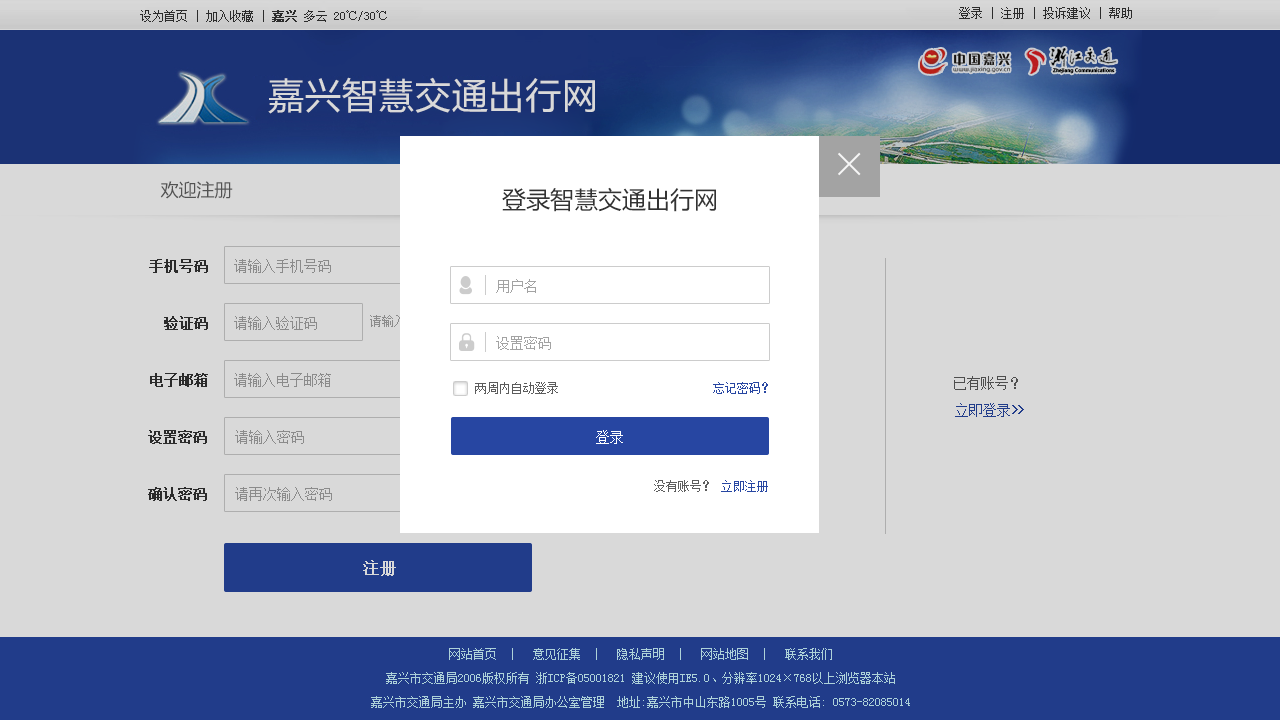
<style>
.page{position:relative;width:1280px;height:720px;background:#d9d9d9}
.page>*{position:absolute;margin:0}
.t1{font:12px "SimSun";color:#333333}
.t2{font:12px "SimSun";color:#333333;font-weight:bold}
.t3{font:36px "MicrosoftYaHei";letter-spacing:0.02em;color:#d9d9d9}
.t4{font:18px "MicrosoftYaHei";color:#626262}
.t5{font:24px "MicrosoftYaHei";color:#333333}
.t6{font:14px "SimSun";color:#333333;font-weight:bold}
.t7{font:14px "SimSun";color:#a3a3a3}
.t8{font:14px "SimSun";color:#5c5c5c}
.t9{font:12px "SimSun";color:#5c5c5c}
.t10{font:12px "SimSun";color:#2746a2}
.t11{font:14px "SimSun";color:#2746a2}
.t12{font:14px "SimSun";color:#2746a2;font-weight:bold}
.t13{font:14px "SimSun";color:#ffffff}
.t14{font:12px "NSimSun";color:#5c5c5c}
.t15{font:12px "NSimSun";color:#2746a2}
.t16{font:16px "SimSun";color:#d9d9d9;font-weight:bold}
.t17{font:12px/24px "NSimSun";color:#aed2d9}
</style>
<div class="page">
<p class="t1" style="left:140px;top:10px;width:247px;height:12px">设为首页 | 加入收藏 | <span class="t2">嘉兴</span> 多云 20℃/30℃</p>
<p class="t1" style="left:959px;top:7px;width:173px;height:12px">登录 | 注册 | 投诉建议 | 帮助</p>
<p class="t3" style="left:268px;top:77px;width:327px;height:37px">嘉兴智慧交通出行网</p>
<p class="t4" style="left:160px;top:181px;width:73px;height:18px">欢迎注册</p>
<p class="t5" style="left:502px;top:187px;width:214px;height:25px">登录智慧交通出行网</p>
<p class="t6" style="left:149px;top:259px;width:59px;height:14px">手机号码</p>
<p class="t7" style="left:234px;top:259px;width:97px;height:14px">请输入手机号码</p>
<p class="t7" style="left:496px;top:279px;width:40px;height:14px">用户名</p>
<p class="t6" style="left:164px;top:316px;width:44px;height:14px">验证码</p>
<p class="t7" style="left:234px;top:316px;width:83px;height:14px">请输入验证码</p>
<p class="t7" style="left:496px;top:336px;width:55px;height:14px">设置密码</p>
<p class="t6" style="left:150px;top:373px;width:58px;height:14px">电子邮箱</p>
<p class="t7" style="left:234px;top:373px;width:97px;height:14px">请输入电子邮箱</p>
<p class="t8" style="left:954px;top:376px;width:64px;height:14px">已有账号？</p>
<p class="t9" style="left:475px;top:382px;width:83px;height:12px">两周内自动登录</p>
<p class="t10" style="left:713px;top:382px;width:55px;height:12px">忘记密码？</p>
<p class="t11" style="left:955px;top:403px;width:69px;height:14px">立即登录<span class="t12">&gt;&gt;</span></p>
<p class="t6" style="left:148px;top:430px;width:59px;height:14px">设置密码</p>
<p class="t7" style="left:235px;top:430px;width:69px;height:14px">请输入密码</p>
<p class="t13" style="left:596px;top:430px;width:27px;height:14px">登录</p>
<p class="t14" style="left:654px;top:480px;width:55px;height:12px">没有账号？</p>
<p class="t15" style="left:721px;top:480px;width:47px;height:12px">立即注册</p>
<p class="t6" style="left:148px;top:487px;width:59px;height:14px">确认密码</p>
<p class="t7" style="left:235px;top:487px;width:97px;height:14px">请再次输入密码</p>
<p class="t16" style="left:363px;top:560px;width:33px;height:16px">注册</p>
<p class="t17" style="left:371px;top:648px;width:539px;height:60px;text-align:center">网站首页  |   意见征集  |   隐私声明  |   网站地图  |   联系我们<br>嘉兴市交通局2006版权所有 浙ICP备05001821 建议使用IE5.0、分辨率1024×768以上浏览器本站<br>嘉兴市交通局主办 嘉兴市交通局办公室管理  地址:嘉兴市中山东路1005号 联系电话: 0573-82085014</p>
</div>
